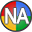
<style>
.page{position:relative;width:32px;height:32px;background:#ffffff}
.page>*{position:absolute;margin:0}
.t1{font:20.3px "ArialMT";letter-spacing:-0.06em;color:#ffffff;font-weight:bold;scale:0.89 1}
</style>
<div class="page">
<p class="t1" style="left:5px;top:8px;width:24px;height:16px">NA</p>
</div>
